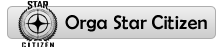
<style>
.page{position:relative;width:224px;height:48px;background:#ffffff}
.page>*{position:absolute;margin:0}
.t1{font:20px "BerlinSansFB-Reg";color:#000000}
</style>
<div class="page">
<p class="t1" style="left:65px;top:15px;width:142px;height:17px">Orga Star Citizen</p>
</div>
